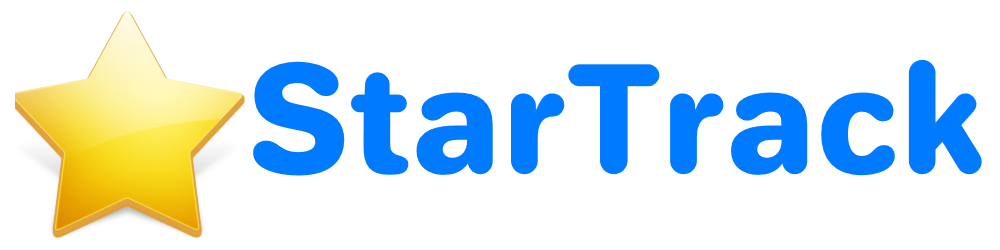
<style>
.page{position:relative;width:1000px;height:250px;background:#ffffff}
.page>*{position:absolute;margin:0}
.t1{font:144px "Jellee-Roman";color:#007bff}
</style>
<div class="page">
<p class="t1" style="left:253px;top:59px;width:729px;height:117px">StarTrack</p>
</div>
